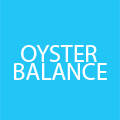
<style>
.page{position:relative;width:120px;height:120px;background:#22c6f6}
.page>*{position:absolute;margin:0}
.t1{font:24px "MyriadPro-Regular";color:#ffffff}
</style>
<div class="page">
<p class="t1" style="left:21px;top:45px;width:76px;height:17px">OYSTER</p>
<p class="t1" style="left:14px;top:63px;width:93px;height:17px">BALANCE</p>
</div>
